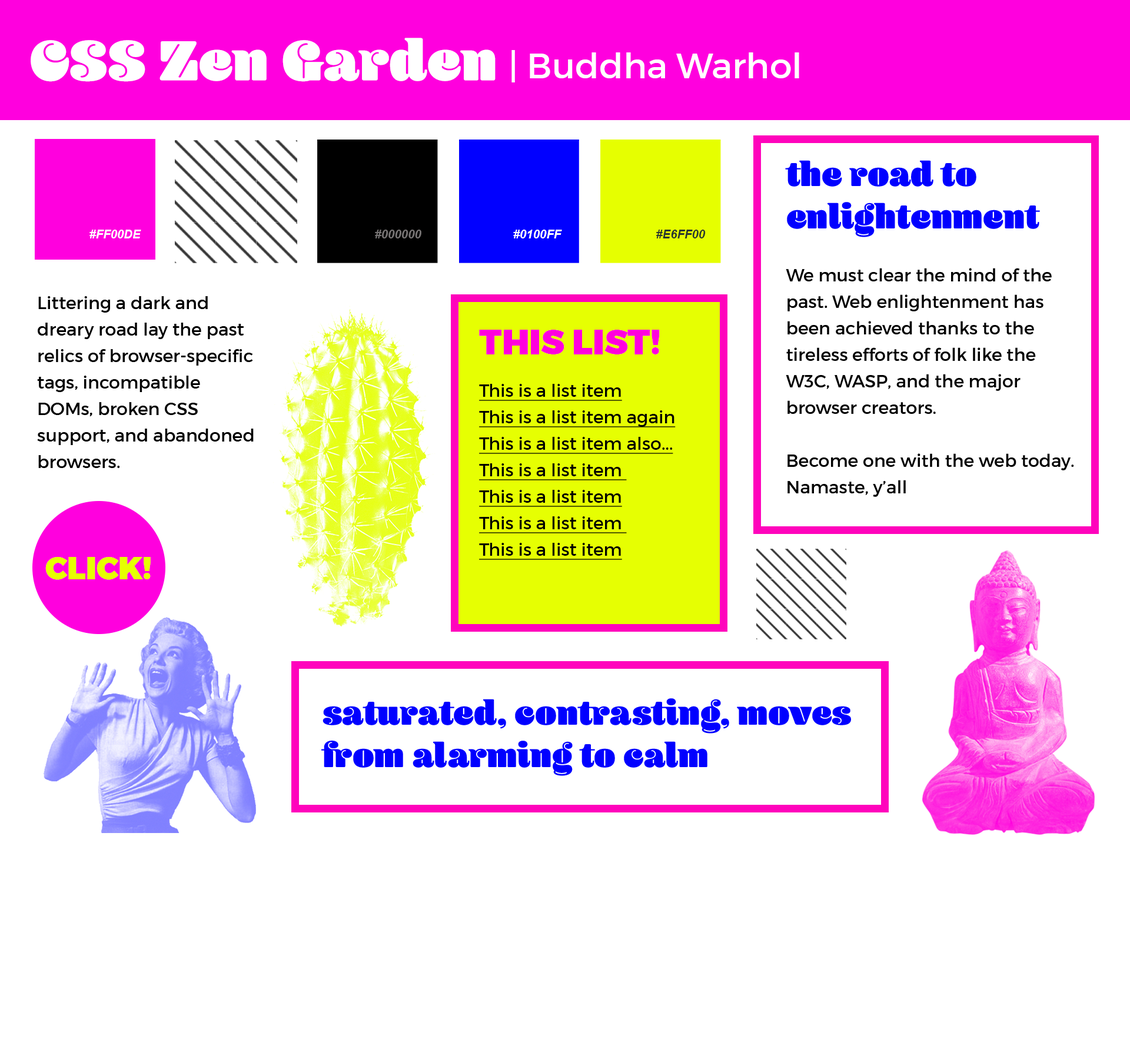
<style>
.page{position:relative;width:1130px;height:1055px;background:#ffffff}
.page>*{position:absolute;margin:0}
.t1{font:58.9px "Blenny-Black";color:#ffffff}
.t2{font:35.3px "Montserrat-Regular";color:#ffffff}
.t3{font:17.7px/26.5px "Montserrat-Regular";color:#000000}
.t4{font:35.3px "Blenny-Black";color:#0100ff}
.t5{font:12px "Arial-BoldItalicMT";color:#ffffff}
.t6{font:12px "Arial-BoldItalicMT";color:#777474}
.t7{font:12px "Arial-BoldItalicMT";color:#29362f}
.t8{font:35.3px "Montserrat-Black";color:#ff00de}
.t9{font:17.7px/26.5px "Montserrat-Regular";color:#000000;text-decoration:underline}
.t10{font:31.7px "Montserrat-Black";color:#e6ff00}
</style>
<div class="page">
<p class="t1" style="left:31px;top:38px;width:465px;height:44px">CSS Zen Garden</p>
<p class="t2" style="left:512px;top:50px;width:287px;height:32px">| Buddha Warhol</p>
<p class="t3" style="left:785px;top:160px;width:289px;height:337px"><span class="t4">the road to enlightenment<br></span><br>We must clear the mind of the past. Web enlightenment has been achieved thanks to the tireless efforts of folk like the W3C, WASP, and the major browser creators.<br><br>Become one with the web today. Namaste, y’all</p>
<p class="t5" style="left:89px;top:230px;width:52px;height:8px">#FF00DE</p>
<p class="t6" style="left:375px;top:230px;width:47px;height:8px">#000000</p>
<p class="t5" style="left:513px;top:230px;width:49px;height:8px">#0100FF</p>
<p class="t7" style="left:656px;top:230px;width:50px;height:8px">#E6FF00</p>
<p class="t3" style="left:37px;top:296px;width:217px;height:172px">Littering a dark and dreary road lay the past relics of browser-specific tags, incompatible DOMs, broken CSS support, and abandoned browsers.</p>
<p class="t8" style="left:479px;top:330px;width:181px;height:24px">THIS LIST!</p>
<p class="t9" style="left:479px;top:384px;width:197px;height:176px">This is a list item<br>This is a list item again<br>This is a list item also...<br>This is a list item <br>This is a list item<br>This is a list item <br>This is a list item</p>
<p class="t10" style="left:45px;top:557px;width:106px;height:23px">CLICK!</p>
<p class="t4" style="left:321px;top:698px;width:530px;height:78px">saturated, contrasting, moves<br>from alarming to calm</p>
</div>
